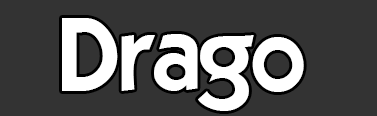
<style>
.page{position:relative;width:377px;height:116px;background:#333333}
.page>*{position:absolute;margin:0}
.t1{font:100px "ELEGANCE";color:#ffffff}
</style>
<div class="page">
<p class="t1" style="left:62px;top:18px;width:242px;height:93px">Drago</p>
</div>
